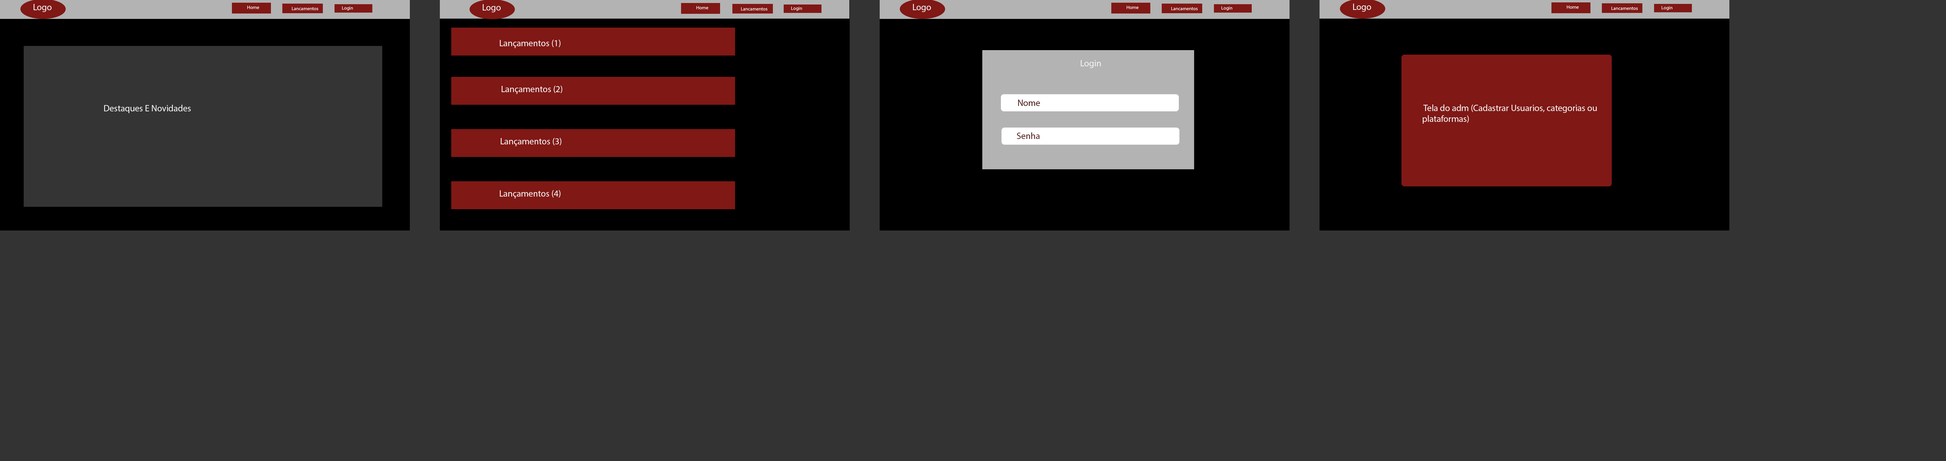
<style>
.page{position:relative;width:1946px;height:461px;background:#333333}
.page>*{position:absolute;margin:0}
.t1{font:9px "MyriadPro-Regular";color:#f7f5f5}
.t2{font:4.8px "MyriadPro-Regular";color:#f7f5f5}
.t3{font:9px "MyriadPro-Regular";color:#420b0b}
.t4{font:9px "MyriadPro-Regular";color:#4c1212}
</style>
<div class="page">
<p class="t1" style="left:34px;top:4px;width:18px;height:8px">Logo</p>
<p class="t2" style="left:247px;top:6px;width:12px;height:3px">Home</p>
<p class="t1" style="left:483px;top:4px;width:18px;height:8px">Logo</p>
<p class="t2" style="left:696px;top:6px;width:12px;height:3px">Home</p>
<p class="t1" style="left:913px;top:4px;width:18px;height:8px">Logo</p>
<p class="t2" style="left:1126px;top:6px;width:12px;height:3px">Home</p>
<p class="t1" style="left:1353px;top:4px;width:18px;height:8px">Logo</p>
<p class="t2" style="left:1567px;top:5px;width:12px;height:4px">Home</p>
<p class="t2" style="left:1661px;top:6px;width:11px;height:4px">Login</p>
<p class="t2" style="left:292px;top:7px;width:26px;height:3px">Lancamentos</p>
<p class="t2" style="left:342px;top:6px;width:11px;height:4px">Login</p>
<p class="t2" style="left:741px;top:7px;width:26px;height:3px">Lancamentos</p>
<p class="t2" style="left:791px;top:7px;width:11px;height:4px">Login</p>
<p class="t2" style="left:1171px;top:7px;width:27px;height:3px">Lancamentos</p>
<p class="t2" style="left:1221px;top:6px;width:11px;height:4px">Login</p>
<p class="t2" style="left:1611px;top:7px;width:27px;height:3px">Lancamentos</p>
<p class="t1" style="left:500px;top:40px;width:60px;height:8px">Lançamentos (1)</p>
<p class="t1" style="left:1081px;top:60px;width:20px;height:8px">Login</p>
<p class="t1" style="left:502px;top:86px;width:60px;height:8px">Lançamentos (2)</p>
<p class="t3" style="left:1018px;top:100px;width:22px;height:6px">Nome</p>
<p class="t1" style="left:104px;top:105px;width:87px;height:8px">Destaques E Novidades</p>
<p class="t1" style="left:1423px;top:104px;width:174px;height:20px">Tela do adm (Cadastrar Usuarios, categorias ou plataformas)</p>
<p class="t1" style="left:501px;top:138px;width:60px;height:8px">Lançamentos (3)</p>
<p class="t4" style="left:1017px;top:132px;width:23px;height:7px">Senha</p>
<p class="t1" style="left:500px;top:190px;width:60px;height:8px">Lançamentos (4)</p>
</div>
